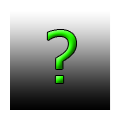
<style>
.page{position:relative;width:120px;height:120px;background:#ffffff}
.page>*{position:absolute;margin:0}
.t1{font:72px "Tahoma"}
</style>
<div class="page">
<p class="t1" style="left:47px;top:30px;width:29px;height:53px">?</p>
</div>
